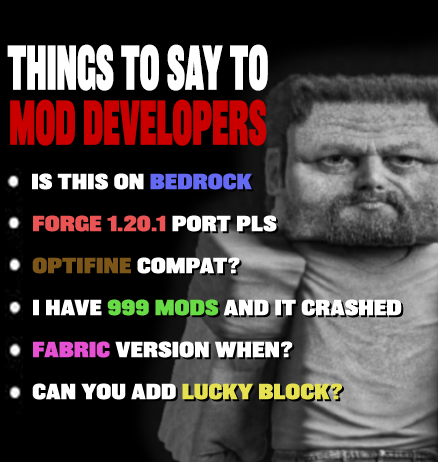
<style>
.page{position:relative;width:438px;height:462px;background:#010001}
.page>*{position:absolute;margin:0}
.t1{font:58px "Balboa-ExtraBlack";color:#ffffff;text-transform:uppercase;scale:0.46 1}
.t2{font:58px "Balboa-ExtraBlack";color:#ca0000;text-transform:uppercase;scale:0.46 1}
.t3{font:20px "Balboa-ExtraBlack";color:#ffffff;text-transform:uppercase}
.t4{font:20px "Balboa-ExtraBlack";color:#646af2;text-transform:uppercase}
.t5{font:20px "Balboa-ExtraBlack";color:#ea5454;text-transform:uppercase}
.t6{font:20px "Balboa-ExtraBlack";color:#7c5619;text-transform:uppercase}
.t7{font:20px "Balboa-ExtraBlack";color:#69db46;text-transform:uppercase}
.t8{font:20px "Balboa-ExtraBlack";color:#e651d3;text-transform:uppercase}
.t9{font:20px "Balboa-ExtraBlack";color:#e6e151;text-transform:uppercase}
</style>
<div class="page">
<p class="t1" style="left:7px;top:44px;width:261px;height:47px">THINGS TO SAY TO</p>
<p class="t2" style="left:10px;top:99px;width:257px;height:47px">MOD DEVELOPERS</p>
<p class="t3" style="left:32px;top:173px;width:220px;height:17px">IS THIS on <span class="t4">Bedrock</span></p>
<p class="t5" style="left:33px;top:215px;width:244px;height:17px">FORGE 1.20.1<span class="t3"> PORT PLS</span></p>
<p class="t6" style="left:32px;top:257px;width:208px;height:17px">Optifine<span class="t3"> COMPAT?</span></p>
<p class="t3" style="left:33px;top:299px;width:369px;height:17px">I have <span class="t7">999 mods</span> and it crashed</p>
<p class="t3" style="left:33px;top:341px;width:260px;height:17px"><span class="t8">Fabric</span> version when?</p>
<p class="t9" style="left:32px;top:383px;width:310px;height:17px"><span class="t3">Can you add </span>lucky block?</p>
</div>
